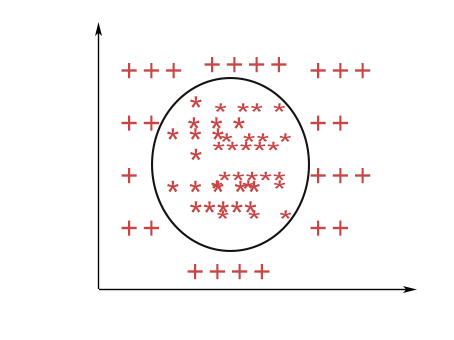
<style>
.page{position:relative;width:454px;height:340px;background:#ffffff}
.page>*{position:absolute;margin:0}
.t1{font:30px "MicrosoftYaHei";color:#cb4444}
.t2{font:22px "MicrosoftYaHei";color:#cb4444;scale:1.36 1}
</style>
<div class="page">
<p class="t1" style="left:121px;top:63px;width:61px;height:173px">+++<br>++<br>+<br>++</p>
<p class="t1" style="left:204px;top:57px;width:83px;height:16px">++++</p>
<p class="t1" style="left:310px;top:63px;width:61px;height:173px">+++<br>++<br>+++<br>++</p>
<p class="t1" style="left:190px;top:96px;width:67px;height:117px">*<br>*<br>*****</p>
<p class="t2" style="left:211px;top:103px;width:75px;height:86px">* ** *<br>*****<br>*  *  *</p>
<p class="t1" style="left:188px;top:117px;width:57px;height:12px">* * *</p>
<p class="t1" style="left:167px;top:128px;width:93px;height:65px">* * *<br>* * * **</p>
<p class="t2" style="left:217px;top:133px;width:75px;height:86px">* ** *<br>*****<br>*  *  *</p>
<p class="t1" style="left:187px;top:264px;width:83px;height:16px">++++</p>
</div>
